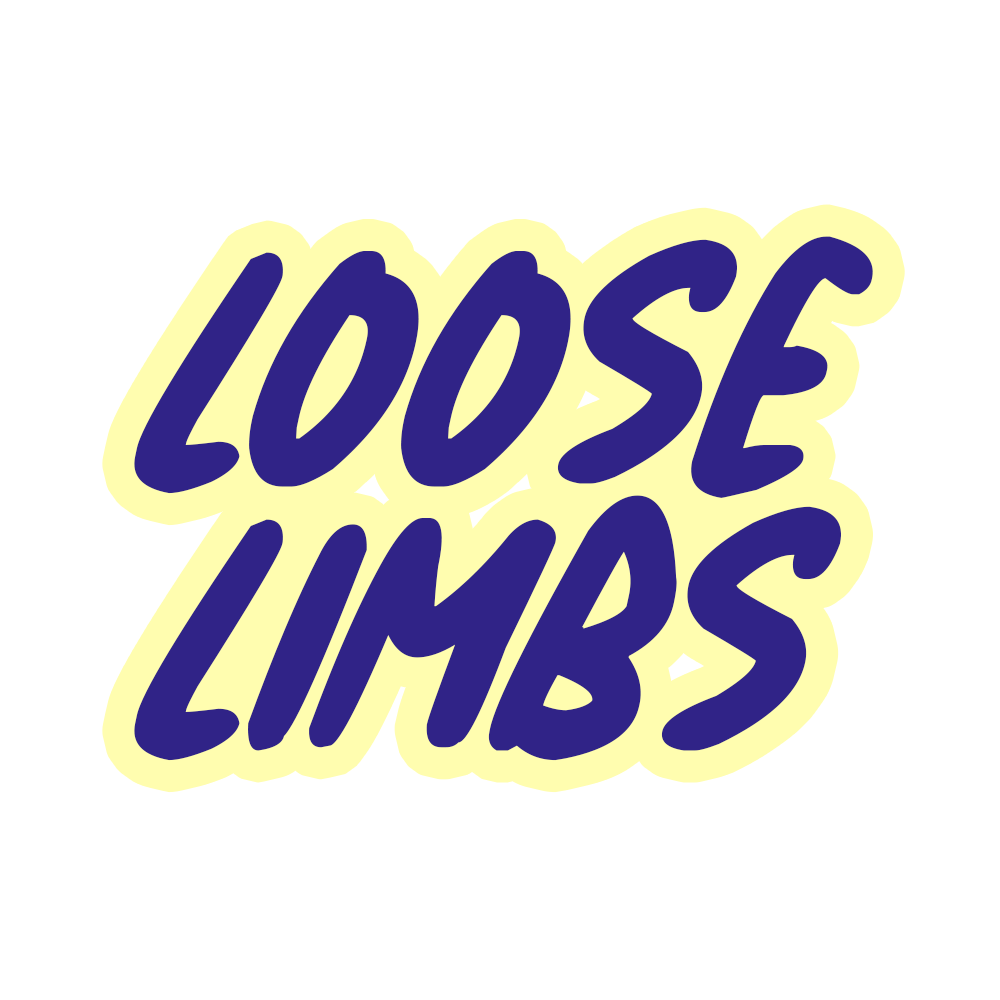
<style>
.page{position:relative;width:1000px;height:1000px;background:#ffffff}
.page>*{position:absolute;margin:0}
.t1{font:234.4px/266.9px "NaturalMarker-Italic";color:#302387}
</style>
<div class="page">
<p class="t1" style="left:134px;top:236px;width:739px;height:525px">LOOSE<br>LIMBS</p>
</div>
